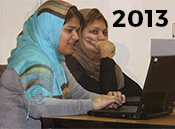
<style>
.page{position:relative;width:175px;height:129px}
.page>*{position:absolute;margin:0}
.t1{font:24px "Montserrat-Bold";letter-spacing:0.02em;color:#020202}
</style>
<div class="page">
<p class="t1" style="left:112px;top:10px;width:56px;height:17px">2013</p>
</div>
